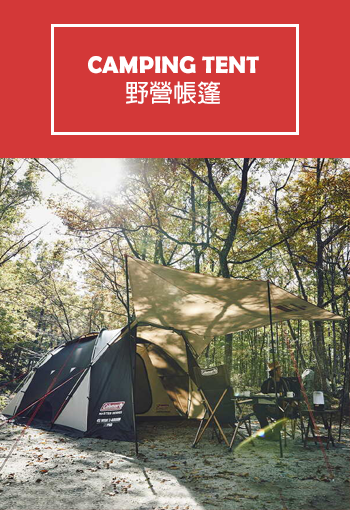
<style>
.page{position:relative;width:350px;height:510px;background:#d33838}
.page>*{position:absolute;margin:0}
.t1{font:24px "BerlinSansFBDemi-Bold";color:#ffffff}
.t2{font:24px "AdobeFanHeitiStd-Bold";color:#ffffff}
</style>
<div class="page">
<p class="t1" style="left:88px;top:56px;width:171px;height:48px;text-align:center">CAMPING TENT<br><span class="t2">野營帳篷</span></p>
</div>
